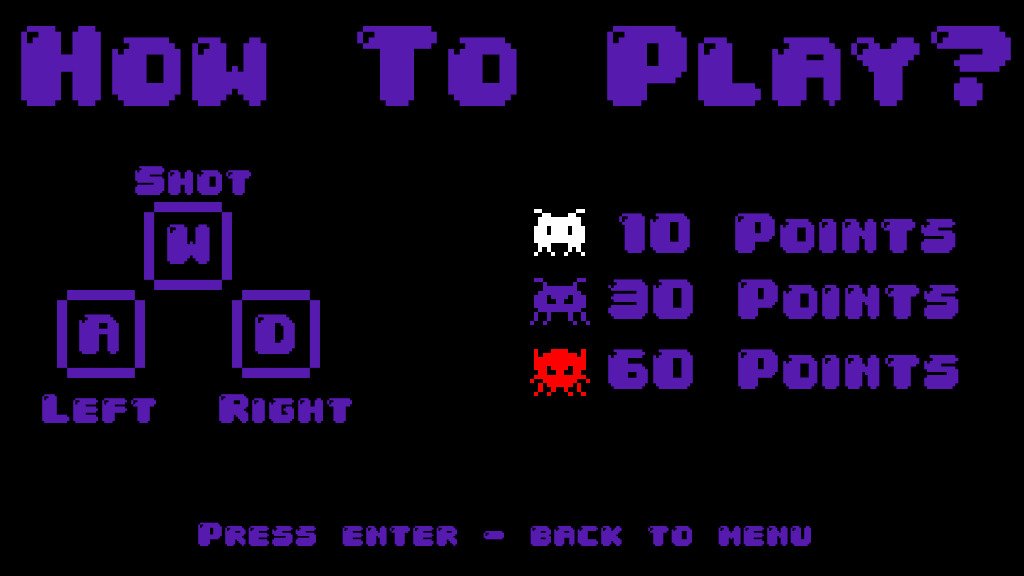
<style>
.page{position:relative;width:1024px;height:576px;background:#000000}
.page>*{position:absolute;margin:0}
.t1{font:97.1px "04b30";color:#561bae}
.t2{font:35px "04b30";color:#561bae}
.t3{font:48px "04b30";color:#561bae}
.t4{font:28.2px "04b30";color:#561bae}
</style>
<div class="page">
<p class="t1" style="left:21px;top:26px;width:990px;height:80px">How To Play?</p>
<p class="t2" style="left:135px;top:166px;width:116px;height:29px">Shot</p>
<p class="t3" style="left:619px;top:213px;width:337px;height:40px">10 Points</p>
<p class="t3" style="left:167px;top:224px;width:43px;height:40px">W</p>
<p class="t3" style="left:608px;top:279px;width:351px;height:40px">30 Points</p>
<p class="t3" style="left:79px;top:314px;width:40px;height:40px">A</p>
<p class="t3" style="left:255px;top:314px;width:40px;height:40px">D</p>
<p class="t3" style="left:608px;top:349px;width:351px;height:40px">60 Points</p>
<p class="t2" style="left:42px;top:394px;width:114px;height:29px">Left</p>
<p class="t2" style="left:219px;top:394px;width:133px;height:29px">Right</p>
<p class="t4" style="left:198px;top:522px;width:613px;height:24px">Press enter - back to menu</p>
</div>
